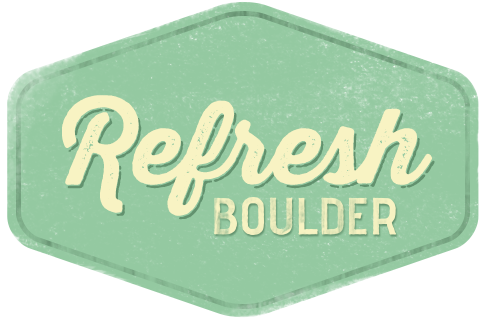
<style>
.page{position:relative;width:486px;height:320px;background:#ffffff}
.page>*{position:absolute;margin:0}
.t1{font:103px "ThirstyRoughBolOne";color:#f8f3c3}
.t2{font:103px "ThirstyRoughBolShd";color:#62926e}
</style>
<div class="page">
<p class="t1" style="left:62px;top:95px;width:370px;height:121px">Refresh</p>
<p class="t2" style="left:67px;top:108px;width:368px;height:112px">Refresh</p>
</div>
